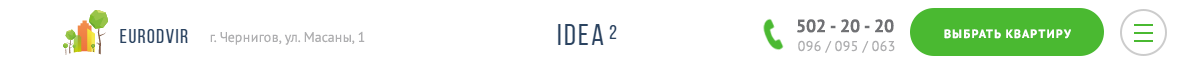
<style>
.page{position:relative;width:1200px;height:70px;background:#ffffff}
.page>*{position:absolute;margin:0}
.t1{font:18px "PTSans-Bold";color:#707174}
.t2{font:18px "PTSans-Bold";color:#4ab931}
.t3{font:12px "PTSans-Bold";letter-spacing:0.1em;color:#ffffff;text-transform:uppercase}
.t4{font:14px "PTSans-Regular";color:#aeaeb0}
</style>
<div class="page">
<p class="t1" style="left:797px;top:19px;width:97px;height:14px"><span class="t2">502 </span>- 20 - 20</p>
<p class="t3" style="left:944px;top:29px;width:127px;height:10px">выбрать квартиру</p>
<p class="t4" style="left:210px;top:31px;width:155px;height:14px">г. Чернигов, ул. Масаны, 1</p>
<p class="t4" style="left:798px;top:40px;width:97px;height:13px">096 / 095 / 063</p>
</div>
